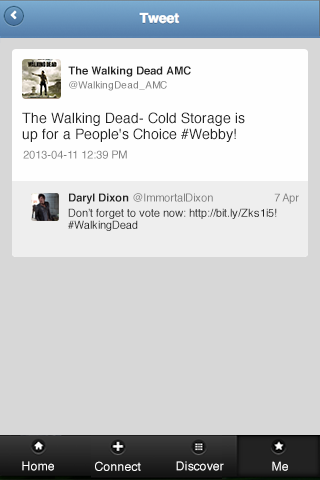
<style>
.page{position:relative;width:320px;height:480px;background:#d7d7d7}
.page>*{position:absolute;margin:0}
.t1{font:11px/14px "Helvetica-Bold";color:#222222}
.t2{font:10px/14px "Helvetica";color:#818181}
.t3{font:14px/16px "Helvetica";color:#222222}
.t4{font:11px "Helvetica";color:#818181}
.t5{font:11px "Helvetica-Bold";color:#222222}
.t6{font:11px/12px "Helvetica";color:#222222}
.t7{font:12px "Helvetica";color:#ffffff}
</style>
<div class="page">
<p class="t1" style="left:68px;top:66px;width:123px;height:25px">The Walking Dead AMC ‏<br><span class="t2">@WalkingDead_AMC</span></p>
<p class="t3" style="left:22px;top:112px;width:223px;height:30px">The Walking Dead- Cold Storage is up for a People's Choice #Webby!</p>
<p class="t4" style="left:23px;top:150px;width:104px;height:9px">2013-04-11 12:39 PM</p>
<p class="t4" style="left:69px;top:193px;width:144px;height:11px"><span class="t5">Daryl Dixon ‏</span>@ImmortalDixon</p>
<p class="t4" style="left:274px;top:193px;width:25px;height:11px">7 Apr</p>
<p class="t6" style="left:68px;top:208px;width:209px;height:23px">Don’t forget to vote now: http://bit.ly/Zks1i5! #WalkingDead</p>
<p class="t7" style="left:22px;top:461px;width:32px;height:10px">Home</p>
<p class="t7" style="left:95px;top:461px;width:46px;height:10px">Connect</p>
<p class="t7" style="left:176px;top:461px;width:48px;height:10px">Discover</p>
<p class="t7" style="left:272px;top:461px;width:16px;height:10px">Me</p>
</div>
